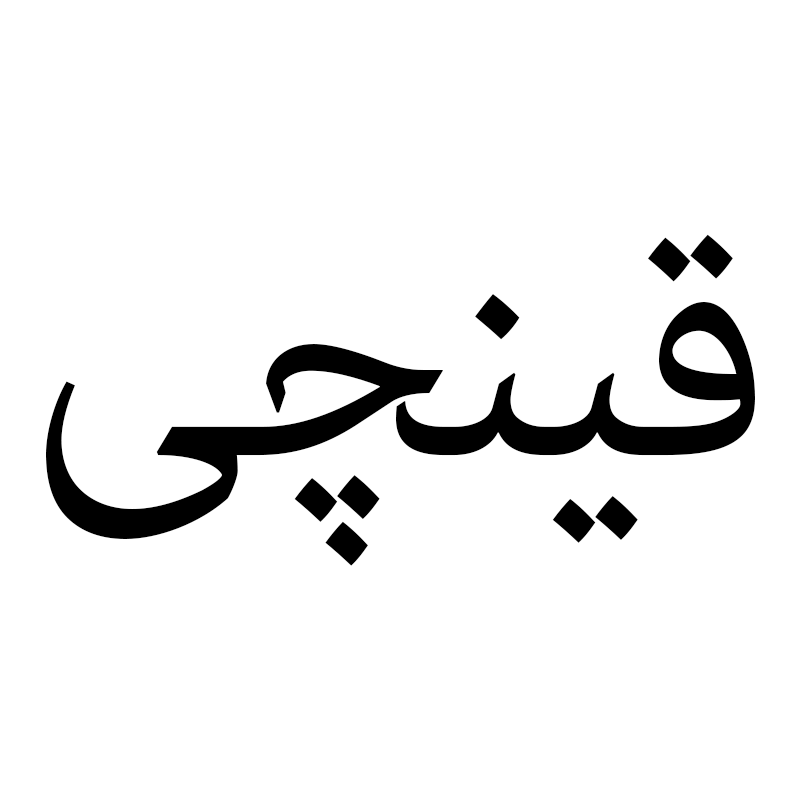
<style>
.page{position:relative;width:800px;height:800px;background:#ffffff}
.page>*{position:absolute;margin:0}
.t1{font:450px "AdobeArabic-Regular";color:#000000}
</style>
<div class="page">
<p class="t1" style="left:46px;top:234px;width:709px;height:332px">قینچی</p>
</div>
